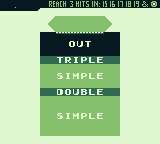
<style>
.page{position:relative;width:160px;height:144px;background:#e0f8cf}
.page>*{position:absolute;margin:0}
.t1{font:8px/8px "Early-GameBoy";color:#e0f8cf}
</style>
<div class="page">
<p class="t1" style="left:57px;top:41px;width:46px;height:78px">Out<br><br>triple<br><br>simple<br><br>double<br><br><br>simple</p>
</div>
